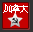
<style>
.page{position:relative;width:33px;height:32px;background:#c50000}
.page>*{position:absolute;margin:0}
.t1{font:10.4px "SimSun";letter-spacing:-0.25em;color:#ffffff}
</style>
<div class="page">
<p class="t1" style="left:3px;top:4px;width:25px;height:9px">加拿大</p>
</div>
